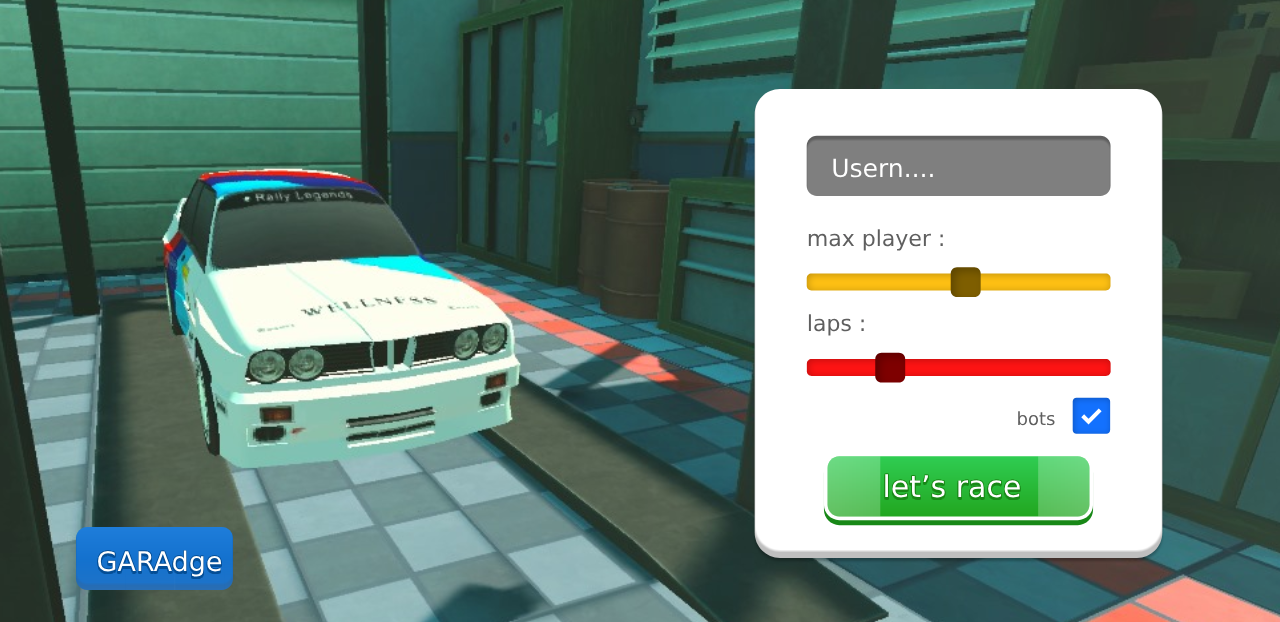
<style>
.page{position:relative;width:1280px;height:622px}
.page>*{position:absolute;margin:0}
.t1{font:25px "Junegull";color:#ffffff}
.t2{font:22px "Junegull";color:#5f5f5f}
.t3{font:18px "Junegull";color:#5f5f5f}
.t4{font:30px "Junegull"}
.t5{font:30px "Junegull";color:#ffffff}
.t6{font:27px "Junegull"}
.t7{font:27px "Junegull";color:#ffffff}
</style>
<div class="page">
<p class="t1" style="left:833px;top:158px;width:100px;height:20px">Usern....</p>
<p class="t2" style="left:808px;top:229px;width:135px;height:22px">max player :</p>
<p class="t2" style="left:808px;top:314px;width:56px;height:22px">laps :</p>
<p class="t3" style="left:1018px;top:411px;width:37px;height:15px">bots</p>
<p class="t4" style="left:885px;top:476px;width:135px;height:24px">let’s race</p>
<p class="t5" style="left:885px;top:474px;width:135px;height:24px">let’s race</p>
<p class="t6" style="left:98px;top:552px;width:124px;height:27px">GARAdge</p>
<p class="t7" style="left:98px;top:550px;width:124px;height:27px">GARAdge</p>
</div>
